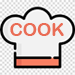
<style>
.page{position:relative;width:75px;height:75px;background:#f2f2f2}
.page>*{position:absolute;margin:0}
.t1{font:18px "ArialRoundedMTBold";color:#e96c55}
</style>
<div class="page">
<p class="t1" style="left:10px;top:23px;width:54px;height:13px">COOK</p>
</div>
